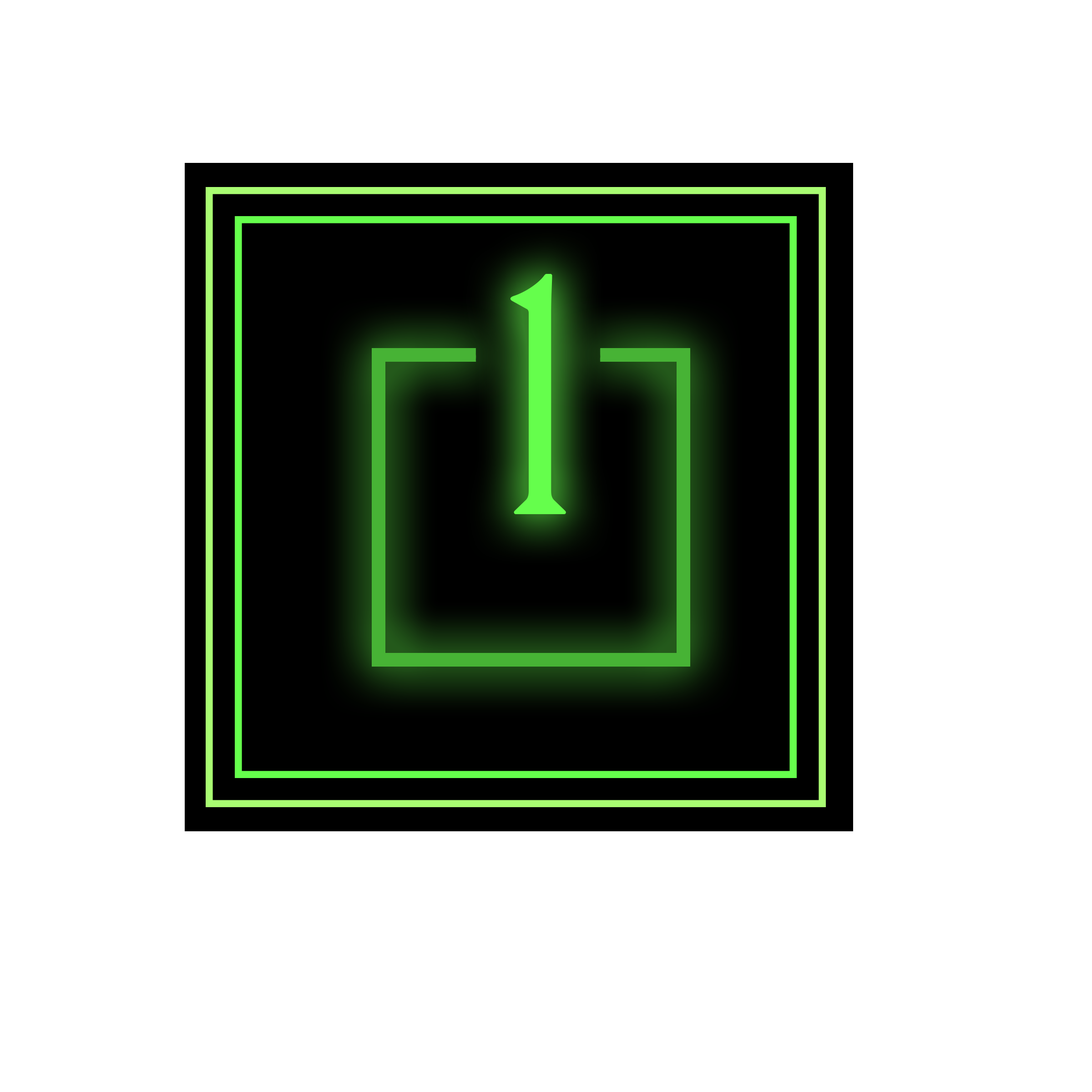
<style>
.page{position:relative;width:1092px;height:1092px;background:#ffffff}
.page>*{position:absolute;margin:0}
.t1{font:320.4px "BirchStd";color:#65fe4c}
</style>
<div class="page">
<p class="t1" style="left:510px;top:274px;width:56px;height:240px">1</p>
</div>
